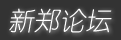
<style>
.page{position:relative;width:121px;height:40px;background:#333333}
.page>*{position:absolute;margin:0}
.t1{font:25.8px "YouYuan";color:#ffffff;font-style:italic}
</style>
<div class="page">
<p class="t1" style="left:9px;top:8px;width:103px;height:25px">新郑论坛</p>
</div>
